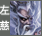
<style>
.page{position:relative;width:42px;height:36px}
.page>*{position:absolute;margin:0}
.t1{font:10.2px "SimHei";color:#ffffff;font-weight:bold}
</style>
<div class="page">
<p class="t1" style="left:0px;top:5px;width:10px;height:25px">左 慈</p>
</div>
